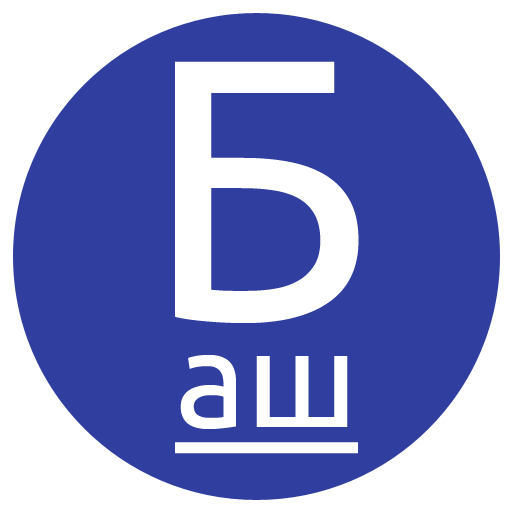
<style>
.page{position:relative;width:512px;height:512px;background:#303f9f}
.page>*{position:absolute;margin:0}
.t1{font:372px "Ubuntu";color:#ffffff}
.t2{font:136px "Ubuntu";color:#ffffff;text-decoration:underline}
</style>
<div class="page">
<p class="t1" style="left:175px;top:61px;width:184px;height:262px">Б</p>
<p class="t2" style="left:175px;top:355px;width:183px;height:99px">аш</p>
</div>
